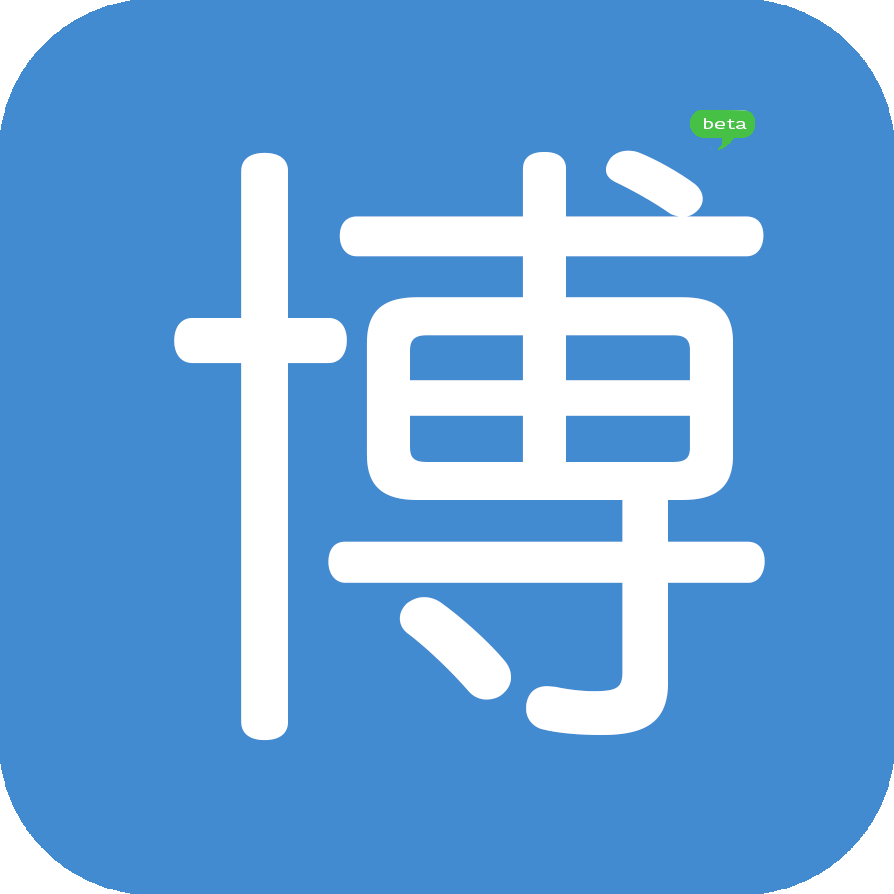
<style>
.page{position:relative;width:894px;height:894px;background:#428bd1}
.page>*{position:absolute;margin:0}
.t1{font:13.8px "KohinoorBangla-Regular";color:#fcfcfc;scale:1.61 1}
.t2{font:632.5px "HiraMaruProN-W4";color:#ffffff}
</style>
<div class="page">
<p class="t1" style="left:704px;top:118px;width:43px;height:11px">beta</p>
<p class="t2" style="left:174px;top:150px;width:591px;height:591px">博</p>
</div>
